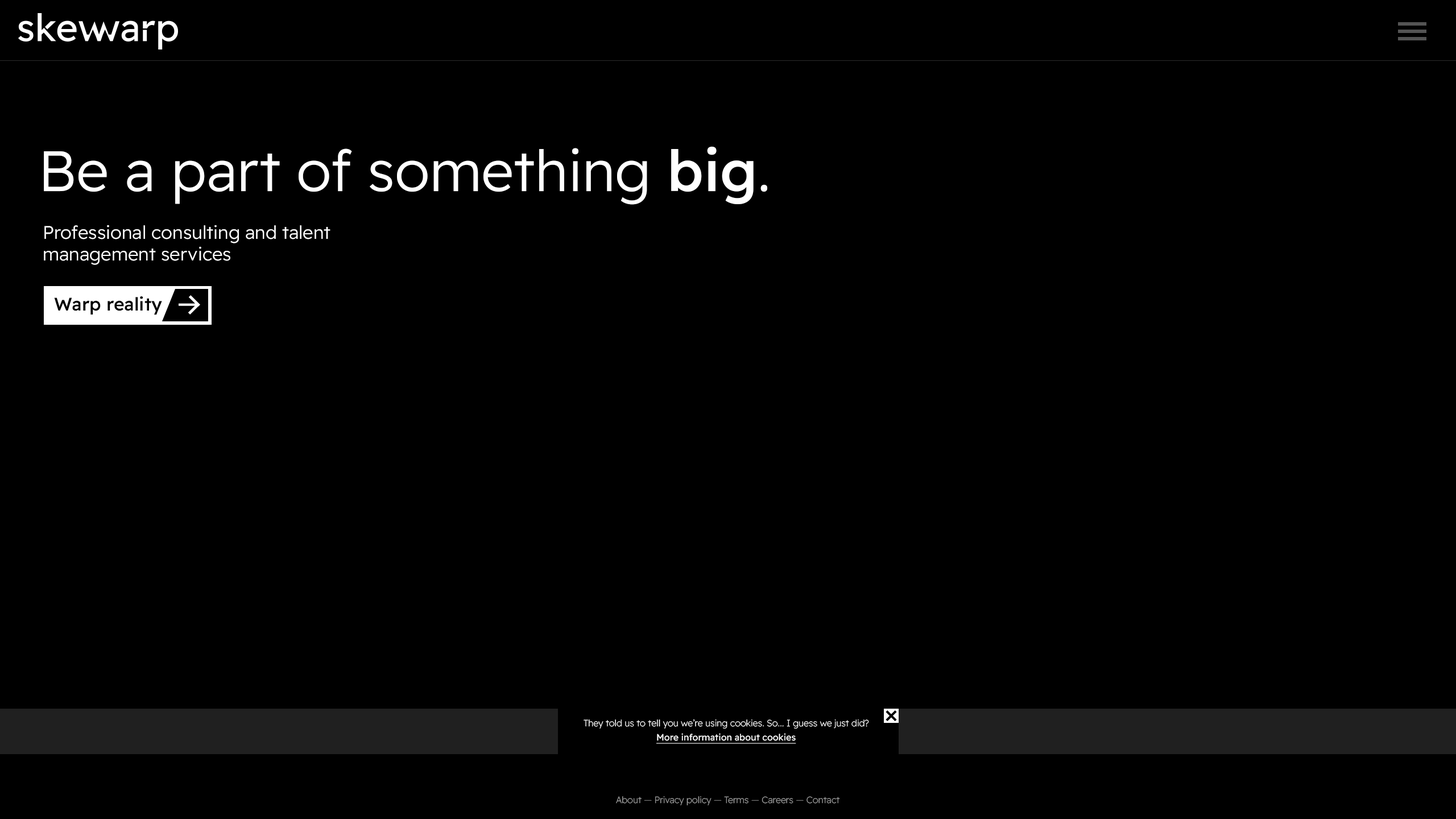
<style>
.page{position:relative;width:1456px;height:819px;background:#000000}
.page>*{position:absolute;margin:0}
.t1{font:56.9px "ReadexPro-Light";color:#ffffff}
.t2{font:56.9px "ReadexPro-Medium";color:#ffffff}
.t3{font:18.2px "ReadexPro-Light";color:#ffffff}
.t4{font:18.2px "ReadexPro-Medium";color:#000000}
.t5{font:9.1px "ReadexPro-ExtraLight";color:#ffffff}
.t6{font:9.1px "ReadexPro-Regular";color:#ffffff;text-decoration:underline}
.t7{font:9.1px "ReadexPro-ExtraLight";color:#9d9d9d}
.t8{font:9.1px "ReadexPro-ExtraLight";color:#717171}
.t9{font:9.1px "ReadexPro-ExtraLight";color:#727272}
</style>
<div class="page">
<p class="t1" style="left:44px;top:146px;width:724px;height:59px">Be a part of something <span class="t2">big</span>.</p>
<p class="t3" style="left:44px;top:225px;width:286px;height:40px">Professional consulting and talent<br>management services</p>
<p class="t4" style="left:54px;top:296px;width:108px;height:19px">Warp reality</p>
<p class="t5" style="left:584px;top:719px;width:285px;height:10px">They told us to tell you we’re using cookies. So... I guess we just did?</p>
<p class="t6" style="left:656px;top:733px;width:140px;height:11px">More information about cookies</p>
<p class="t7" style="left:616px;top:796px;width:224px;height:9px">About <span class="t8">— </span>Privacy policy <span class="t9">— </span>Terms <span class="t9">— </span>Careers <span class="t9">— </span>Contact</p>
</div>
